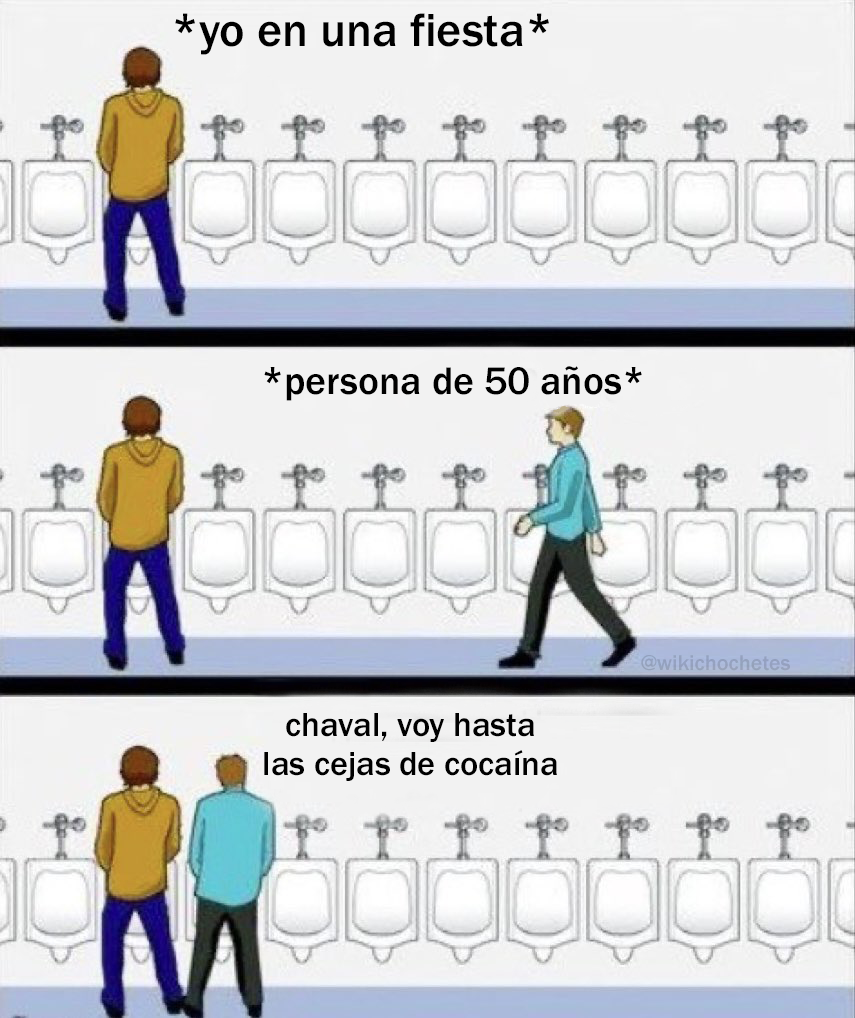
<style>
.page{position:relative;width:855px;height:1018px;background:#f2f2f2}
.page>*{position:absolute;margin:0}
.t1{font:48px "FranklinGothic-Medium";color:#000000}
.t2{font:39.7px "FranklinGothic-Medium";color:#000000}
.t3{font:22px "FranklinGothic-Medium";color:#95a2be}
.t4{font:34.4px "FranklinGothic-Medium";color:#000000}
</style>
<div class="page">
<p class="t1" style="left:175px;top:13px;width:374px;height:42px">*yo en una fiesta*</p>
<p class="t2" style="left:264px;top:366px;width:378px;height:35px">*persona de 50 años*</p>
<p class="t3" style="left:641px;top:655px;width:149px;height:16px">@wikichochetes</p>
<p class="t4" style="left:264px;top:713px;width:293px;height:68px;text-align:center">chaval, voy hasta<br>las cejas de cocaína</p>
</div>
